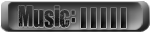
<style>
.page{position:relative;width:150px;height:32px}
.page>*{position:absolute;margin:0}
.t1{font:24px "YouAreLoved";color:#262626}
</style>
<div class="page">
<p class="t1" style="left:18px;top:5px;width:57px;height:23px">Music:</p>
</div>
